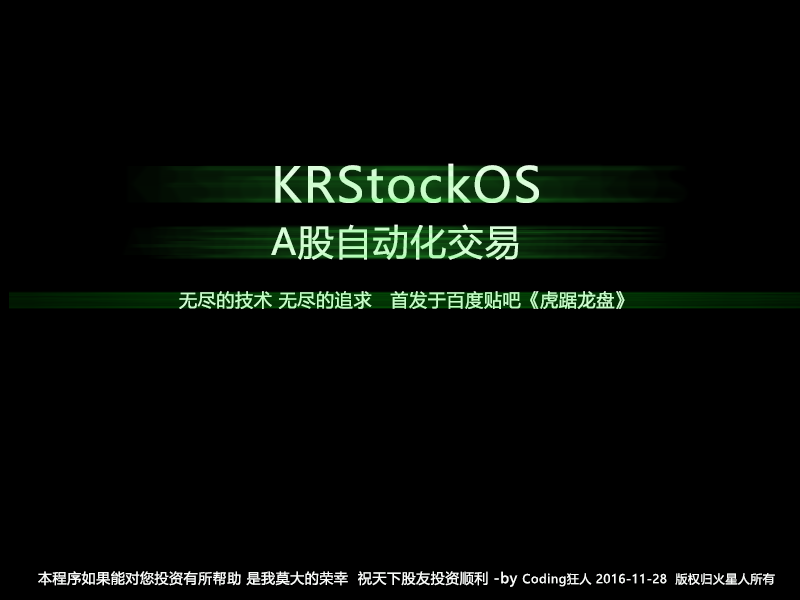
<style>
.page{position:relative;width:800px;height:600px;background:#000000}
.page>*{position:absolute;margin:0}
.t1{font:48px "MicrosoftYaHei";letter-spacing:0.04em;color:#cefcce}
.t2{font:36px "MicrosoftYaHei";letter-spacing:0.04em;color:#c9fcca}
.t3{font:18px "MicrosoftYaHei";letter-spacing:0.04em;color:#c4fcc7}
.t4{font:14px "MicrosoftYaHei";letter-spacing:0.04em;color:#fafcfa}
.t5{font:12px "MicrosoftYaHei";letter-spacing:0.04em;color:#fafcfa}
</style>
<div class="page">
<p class="t1" style="left:275px;top:163px;width:264px;height:40px">KRStockOS</p>
<p class="t2" style="left:271px;top:224px;width:248px;height:36px">A股自动化交易</p>
<p class="t3" style="left:179px;top:291px;width:446px;height:18px">无尽的技术 无尽的追求   首发于百度贴吧《虎踞龙盘》</p>
<p class="t4" style="left:38px;top:571px;width:737px;height:16px">本程序如果能对您投资有所帮助 是我莫大的荣幸  祝天下股友投资顺利 -by <span class="t5">Coding狂人 2016-11-28  版权归火星人所有</span></p>
</div>
